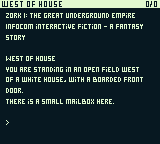
<style>
.page{position:relative;width:160px;height:144px;background:#071821}
.page>*{position:absolute;margin:0}
.t1{font:8px "Pixel";color:#071821}
.t2{font:6.7px/10.7px "Pixel";color:#e0f8cf}
</style>
<div class="page">
<p class="t1" style="left:2px;top:1px;width:60px;height:6px">west of house</p>
<p class="t1" style="left:146px;top:1px;width:11px;height:6px">0/0</p>
<p class="t2" style="left:6px;top:13px;width:137px;height:112px">Zork I: The great underground empire<br>Infocom interactive fiction - a Fantasy<br>Story<br><br>West of House<br>You are standing in an open field west<br>of a white house, with a boarded front<br>door.<br>There is a small mailbox Here.<br><br>&gt;</p>
</div>
